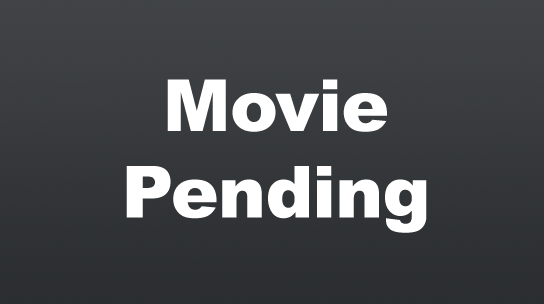
<style>
.page{position:relative;width:544px;height:304px}
.page>*{position:absolute;margin:0}
.t1{font:72px "Arial-Black";color:#ffffff}
</style>
<div class="page">
<p class="t1" style="left:126px;top:79px;width:301px;height:154px;text-align:center">Movie<br>Pending</p>
</div>
